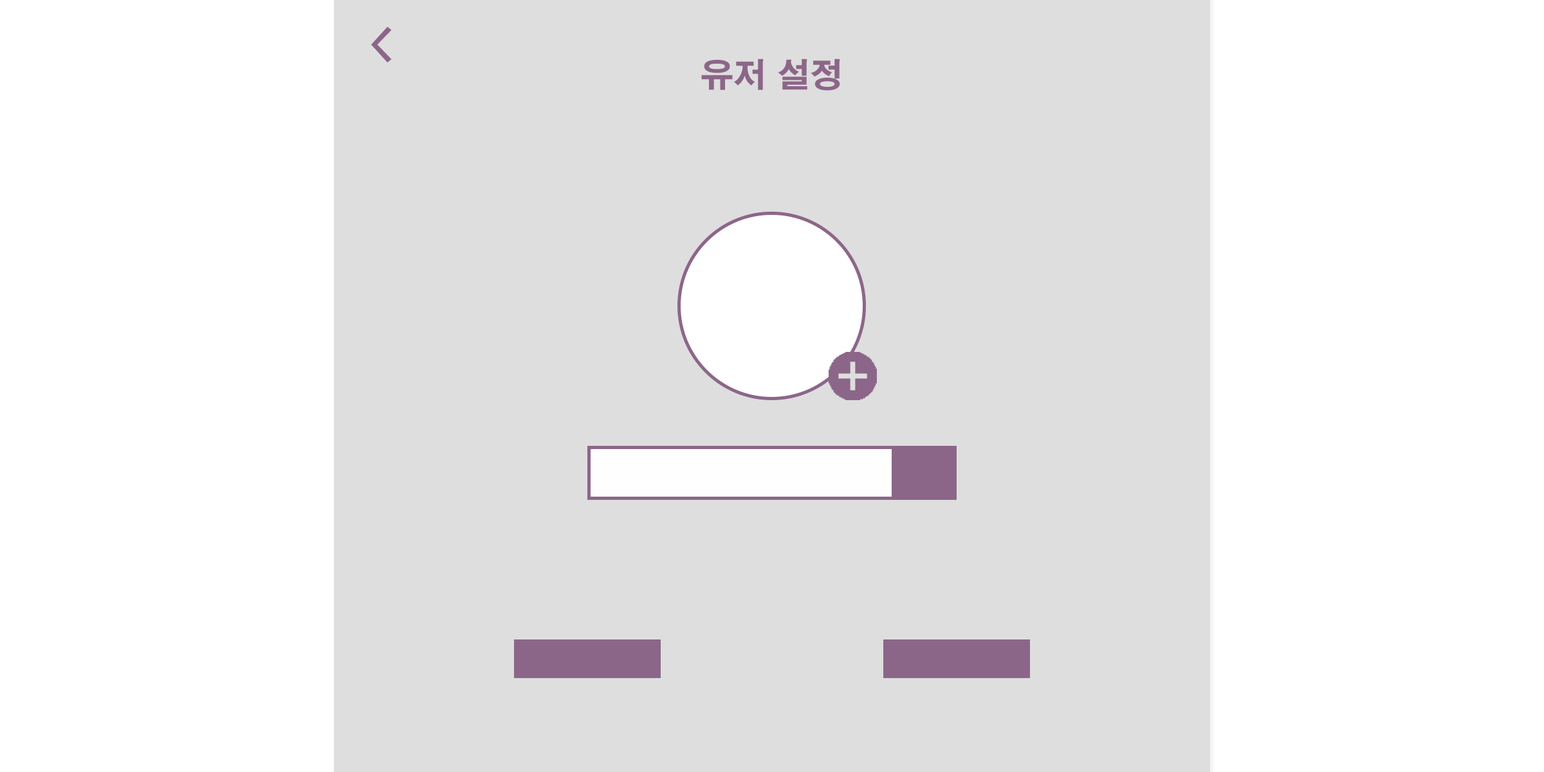
<style>
.page{position:relative;width:1544px;height:772px;background:#dedede}
.page>*{position:absolute;margin:0}
.t1{font:46.3px "H2gtrE";color:#8c6689}
.t2{font:32.8px "H2gtrE";color:#8c6689}
</style>
<div class="page">
<p class="t1" style="left:371px;top:26px;width:21px;height:36px">&lt;</p>
<p class="t2" style="left:701px;top:59px;width:139px;height:32px">유저 설정</p>
</div>
